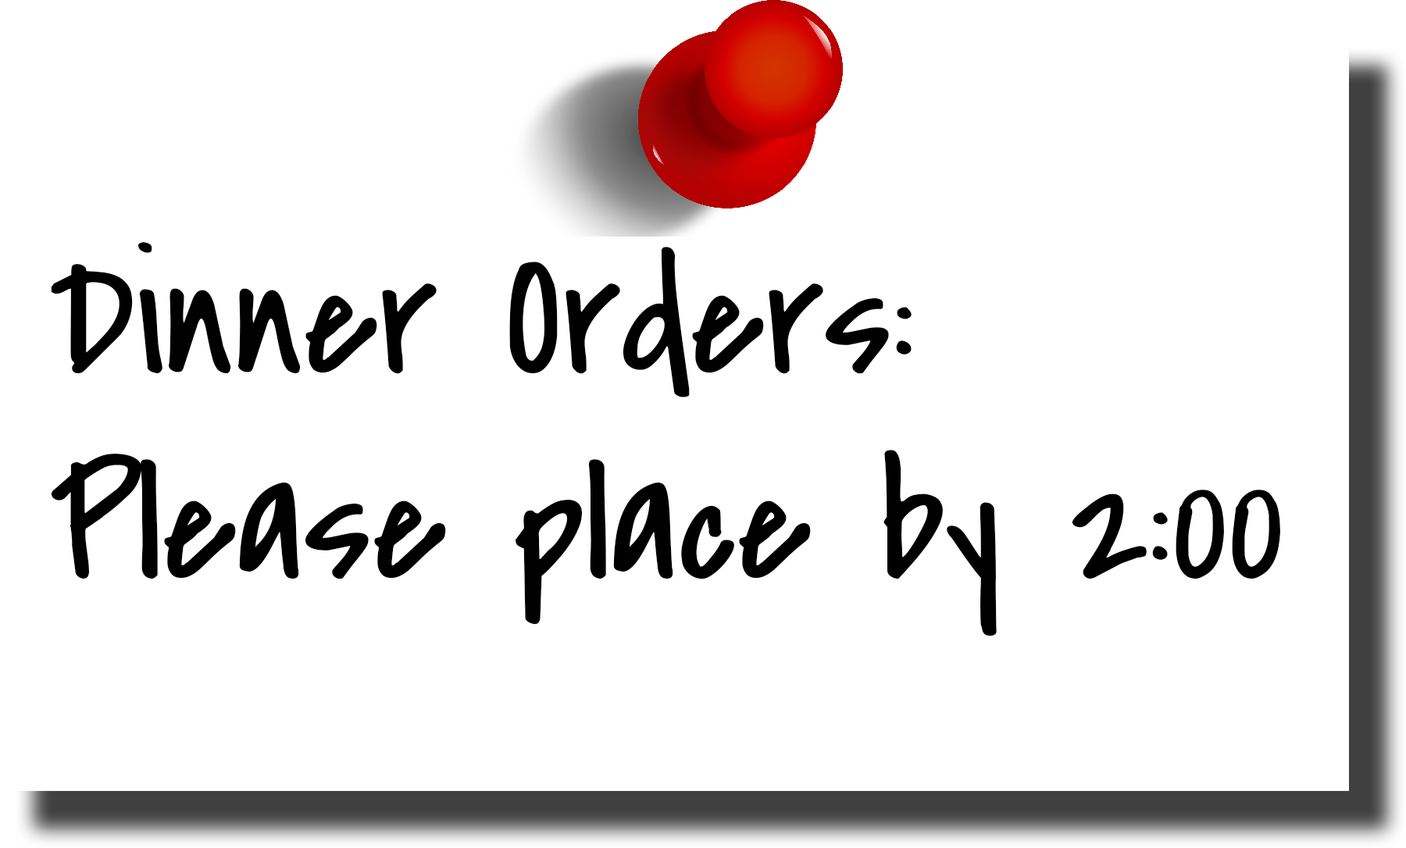
<style>
.page{position:relative;width:1406px;height:848px;background:#ffffff}
.page>*{position:absolute;margin:0}
.t1{font:171.1px "CoveredByYourGrace";color:#000000}
</style>
<div class="page">
<p class="t1" style="left:51px;top:242px;width:1229px;height:395px">Dinner Orders: <br>Please place by 2:00</p>
</div>
